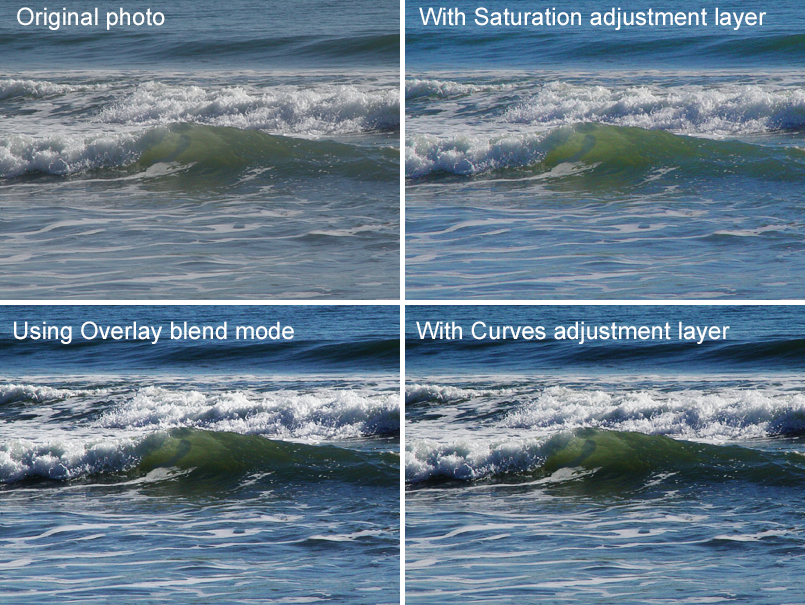
<style>
.page{position:relative;width:805px;height:605px}
.page>*{position:absolute;margin:0}
.t1{font:24px "ArialMT";color:#ffffff}
</style>
<div class="page">
<p class="t1" style="left:17px;top:7px;width:148px;height:23px">Original photo</p>
<p class="t1" style="left:419px;top:7px;width:348px;height:23px">With Saturation adjustment layer</p>
<p class="t1" style="left:14px;top:321px;width:280px;height:23px">Using Overlay blend mode</p>
<p class="t1" style="left:416px;top:321px;width:314px;height:23px">With Curves adjustment layer</p>
</div>
